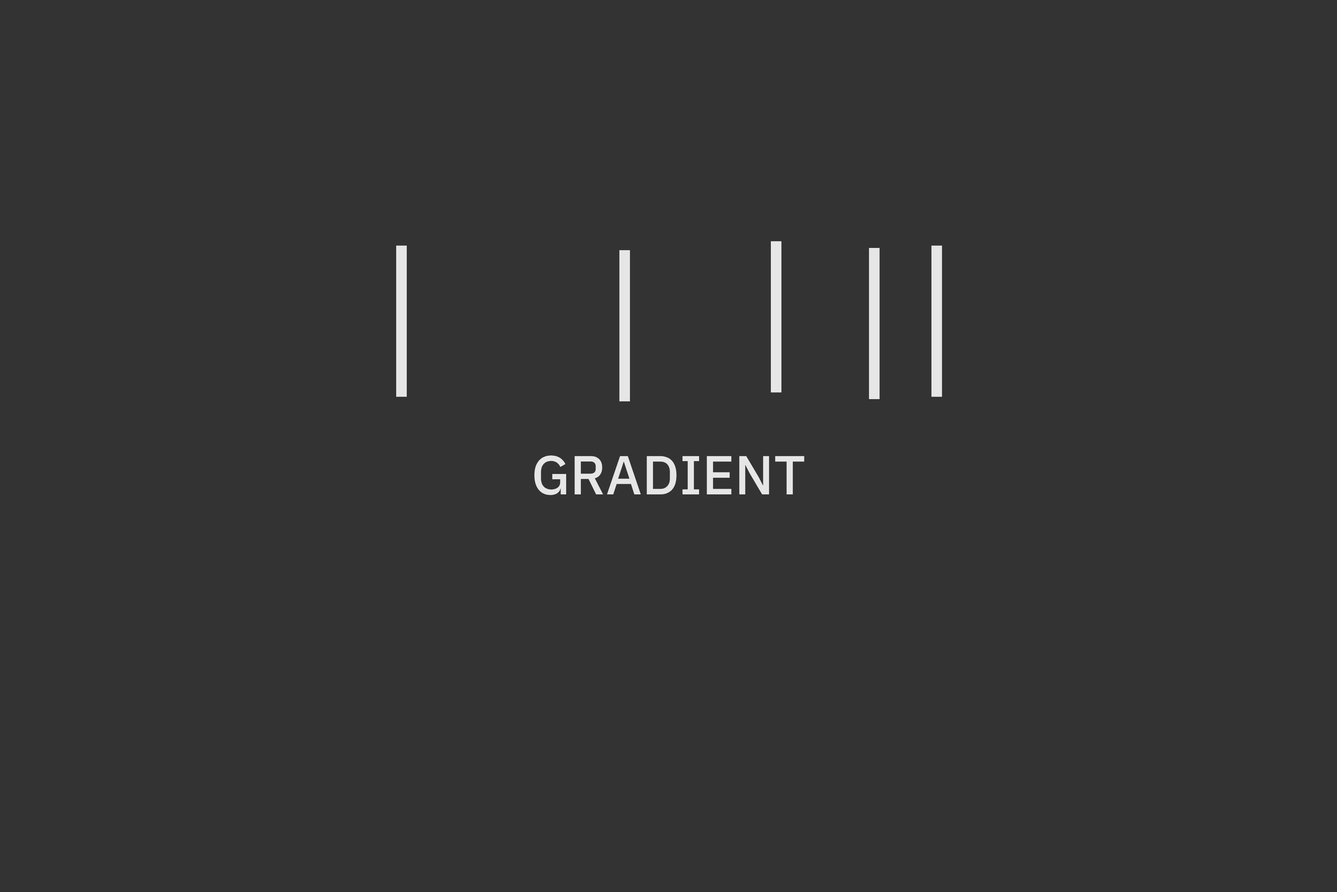
<style>
.page{position:relative;width:1337px;height:892px;background:#333333}
.page>*{position:absolute;margin:0}
.t1{font:54.9px "IBMPlexSans-Medium";color:#e6e6e6}
</style>
<div class="page">
<p class="t1" style="left:534px;top:455px;width:271px;height:40px">GRADIENT</p>
</div>
